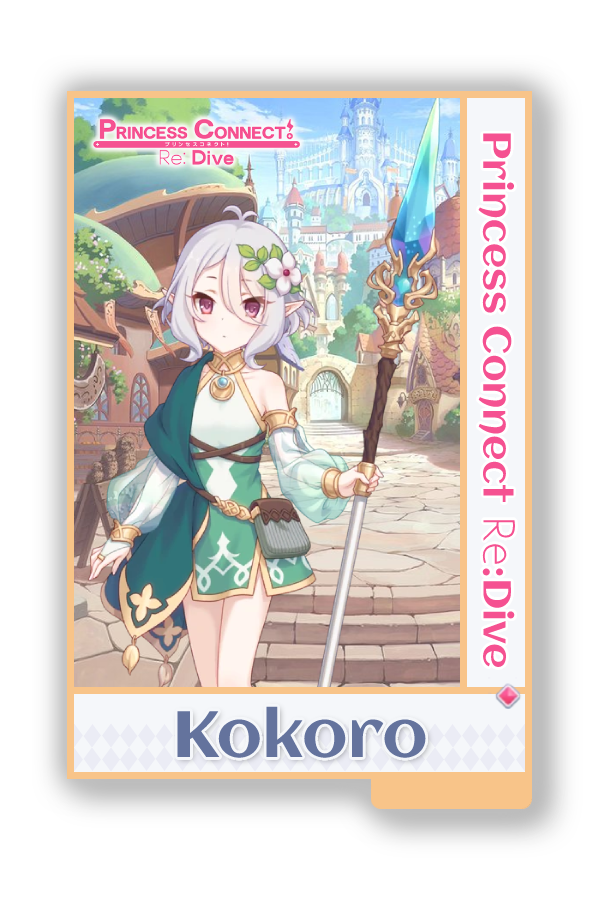
<style>
.page{position:relative;width:600px;height:900px;background:#ffffff}
.page>*{position:absolute;margin:0}
.t1{font:39px "Aclonica-Regular";color:#f55191}
.t2{font:39px "AaarghNormal";color:#f55191}
.t3{font:65px "Aclonica-Regular";color:#64739d}
</style>
<div class="page">
<p class="t1" style="left:478px;top:133px;width:38px;height:534px;rotate:90deg">Princess Connect <span class="t2">Re</span>:Dive</p>
<p class="t3" style="left:177px;top:706px;width:249px;height:52px">Kokoro</p>
</div>
